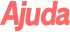
<style>
.page{position:relative;width:70px;height:32px;background:#ffffff}
.page>*{position:absolute;margin:0}
.t1{font:30.7px "RodinPro-EB";letter-spacing:-0.067em;color:#fa6867;font-style:italic;scale:0.83 1}
</style>
<div class="page">
<p class="t1" style="left:0px;top:0px;width:71px;height:32px">Ajuda</p>
</div>
